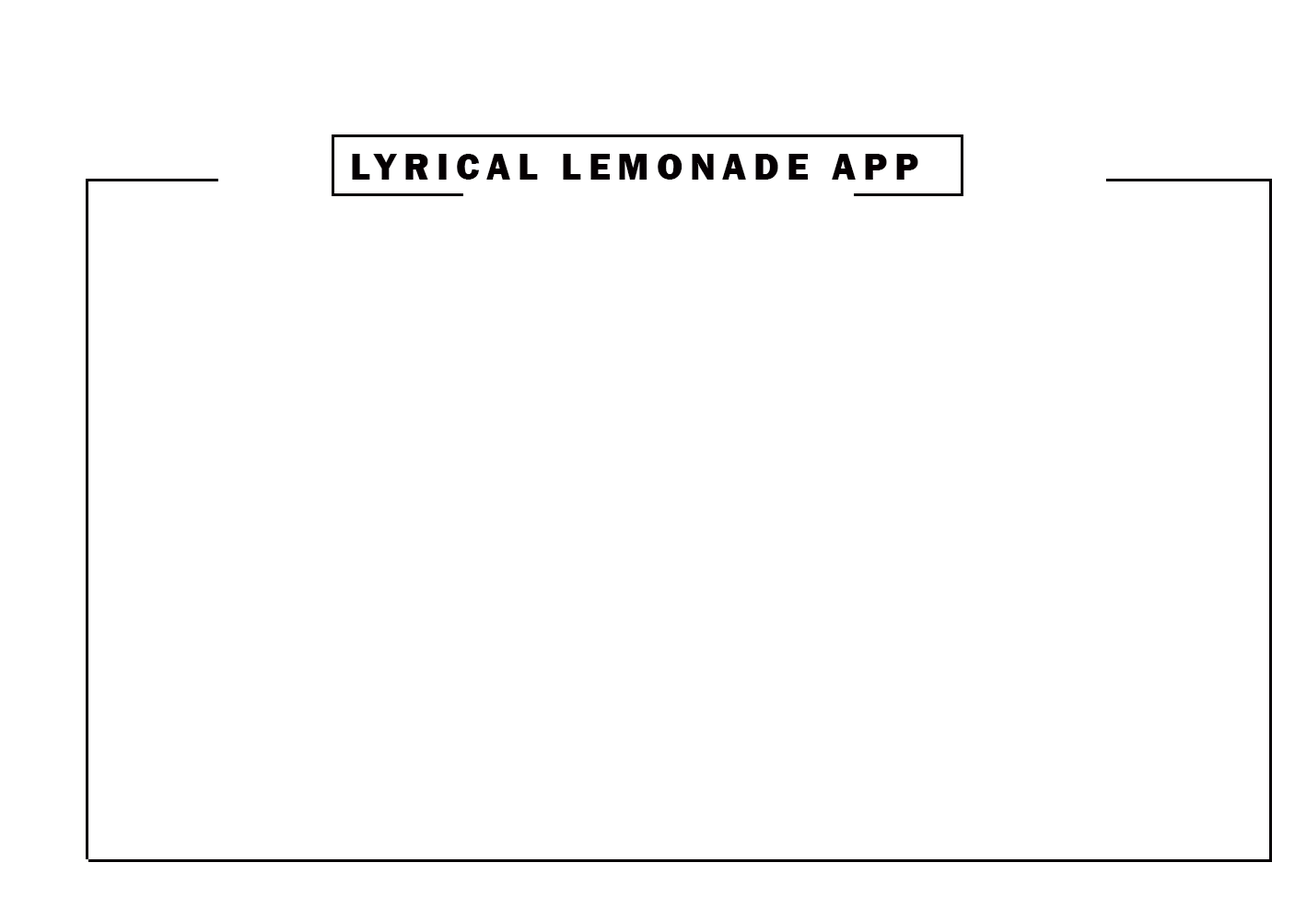
<style>
.page{position:relative;width:1295px;height:921px;background:#ffffff}
.page>*{position:absolute;margin:0}
.t1{font:38.1px "FranklinGothic-Heavy";letter-spacing:0.18em;color:#050002}
</style>
<div class="page">
<p class="t1" style="left:352px;top:154px;width:566px;height:26px">LYRICAL LEMONADE APP</p>
</div>
